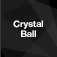
<style>
.page{position:relative;width:57px;height:57px;background:#202020}
.page>*{position:absolute;margin:0}
.t1{font:9px "HelveticaNeue-Bold";color:#fefeff}
</style>
<div class="page">
<p class="t1" style="left:13px;top:20px;width:30px;height:17px;text-align:center">Crystal <br>Ball</p>
</div>
